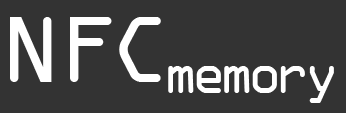
<style>
.page{position:relative;width:346px;height:113px;background:#333333}
.page>*{position:absolute;margin:0}
.t1{font:100px "OCRAExtended";letter-spacing:-0.121em;color:#ffffff}
.t2{font:100px "OCRAExtended";color:#ffffff}
.t3{font:58.3px "OCRAExtended";letter-spacing:-0.121em;color:#ffffff}
</style>
<div class="page">
<p class="t1" style="left:10px;top:17px;width:151px;height:65px"><span class="t2">N</span>FC</p>
<p class="t3" style="left:168px;top:66px;width:166px;height:37px">memory</p>
</div>
